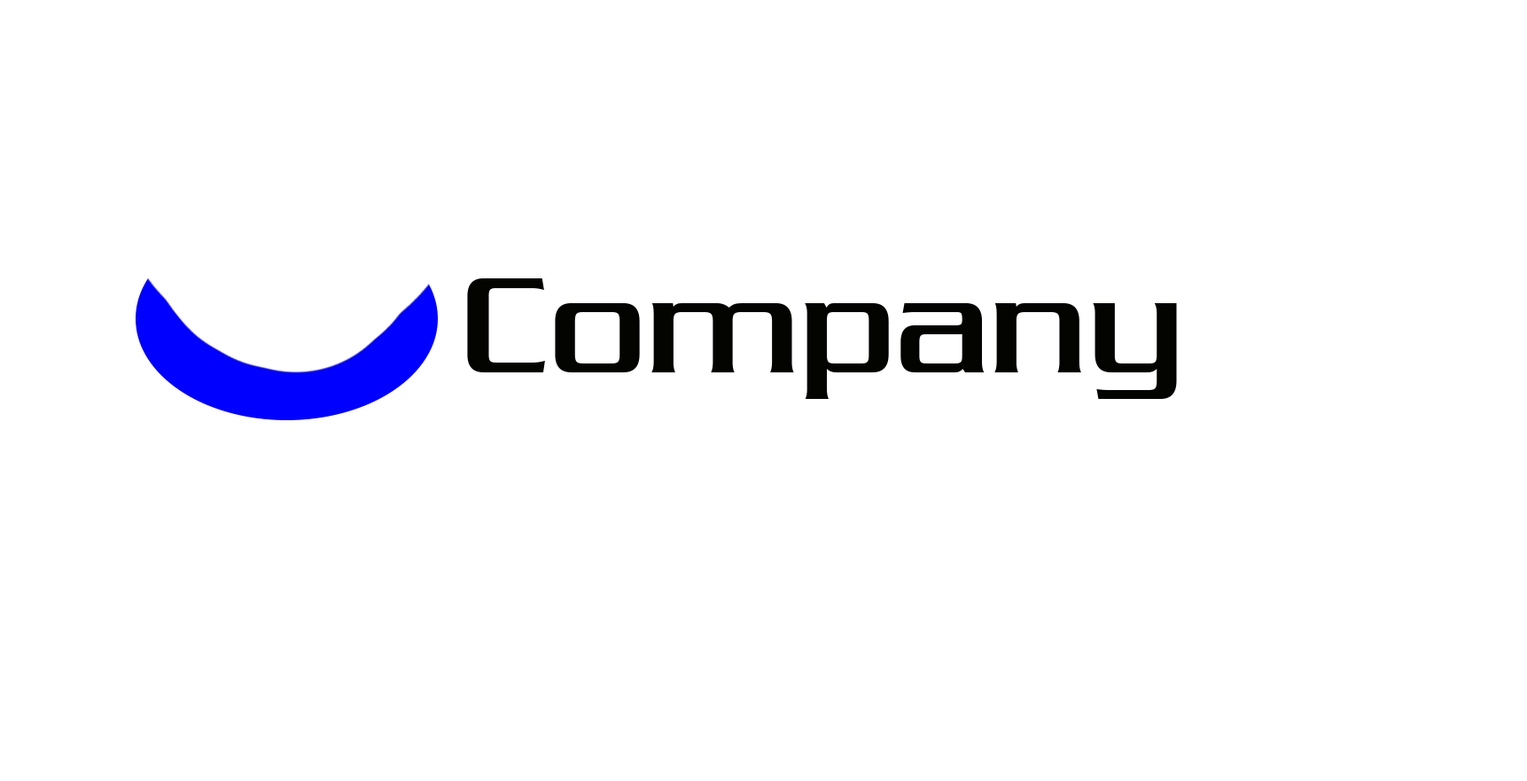
<style>
.page{position:relative;width:1527px;height:781px;background:#ffffff}
.page>*{position:absolute;margin:0}
.t1{font:140.9px "Dungeon-Regular";color:#030300}
</style>
<div class="page">
<p class="t1" style="left:467px;top:278px;width:710px;height:121px">Company</p>
</div>
